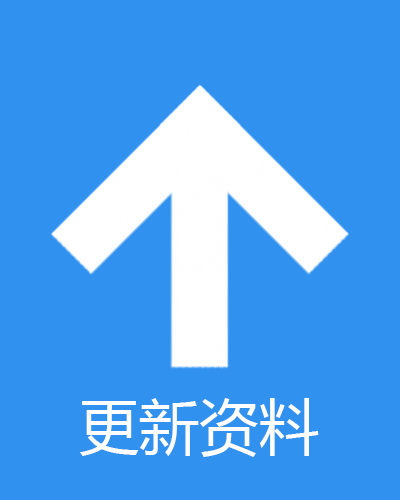
<style>
.page{position:relative;width:400px;height:500px;background:#3191ef}
.page>*{position:absolute;margin:0}
.t1{font:60px "MicrosoftYaHei";color:#ffffff}
</style>
<div class="page">
<p class="t1" style="left:80px;top:398px;width:239px;height:59px">更新资料</p>
</div>
